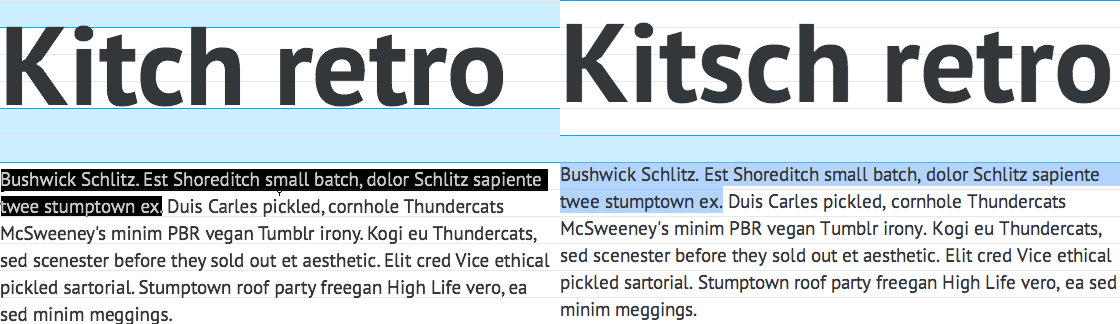
<style>
.page{position:relative;width:1120px;height:324px;background:#ffffff}
.page>*{position:absolute;margin:0}
.t1{font:19px/27px "PTSans-Regular";color:#33373a}
.t2{font:111px/27px "PTSans-Bold";color:#33373a}
</style>
<div class="page">
<p class="t1" style="left:0px;top:25px;width:550px;height:300px"><span class="t2">Kitch retro<br></span>Bushwick Schlitz. Est Shoreditch small batch, dolor Schlitz sapiente twee stumptown ex. Duis Carles pickled, cornhole Thundercats McSweeney's minim PBR vegan Tumblr irony. Kogi eu Thundercats, sed scenester before they sold out et aesthetic. Elit cred Vice ethical pickled sartorial. Stumptown roof party freegan High Life vero, ea sed minim meggings.</p>
</div>
